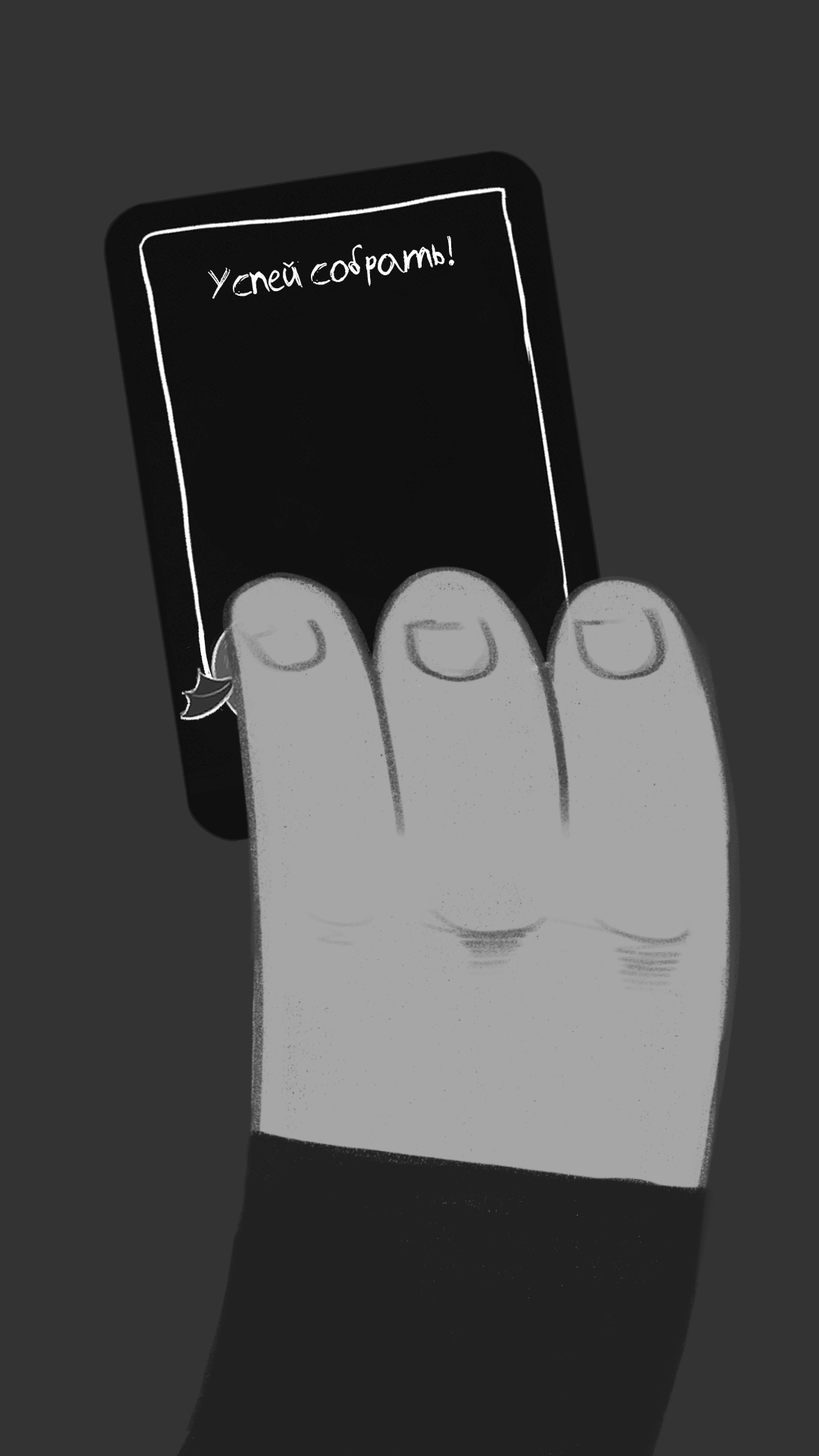
<style>
.page{position:relative;width:819px;height:1456px;background:#333333}
.page>*{position:absolute;margin:0}
.t1{font:41.8px "Remains";color:#ffffff}
</style>
<div class="page">
<p class="t1" style="left:208px;top:236px;width:246px;height:63px;rotate:-8deg">Успей собрать!</p>
</div>
